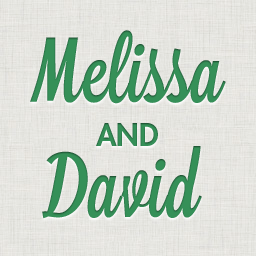
<style>
.page{position:relative;width:256px;height:256px}
.page>*{position:absolute;margin:0}
.t1{font:90px "Lavanderia-Sturdy";color:#359058}
.t2{font:30px "FuturaStd-Heavy";color:#359058}
</style>
<div class="page">
<p class="t1" style="left:30px;top:30px;width:196px;height:74px">Melissa</p>
<p class="t2" style="left:96px;top:123px;width:62px;height:23px">AND</p>
<p class="t1" style="left:42px;top:146px;width:160px;height:73px">David</p>
</div>
